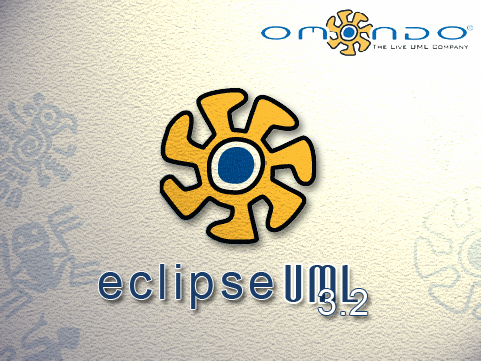
<style>
.page{position:relative;width:481px;height:361px}
.page>*{position:absolute;margin:0}
.t1{font:48px "ArialMT";letter-spacing:0.1em;color:#1a3d69}
.t2{font:48px "Avatar";letter-spacing:0.1em;color:#1a3d69}
.t3{font:36px "ArialMT";letter-spacing:0.025em;color:#ffffff}
</style>
<div class="page">
<p class="t1" style="left:98px;top:264px;width:175px;height:45px">eclipse</p>
<p class="t2" style="left:285px;top:265px;width:73px;height:37px">UML</p>
<p class="t3" style="left:318px;top:289px;width:50px;height:26px">3.2</p>
</div>
